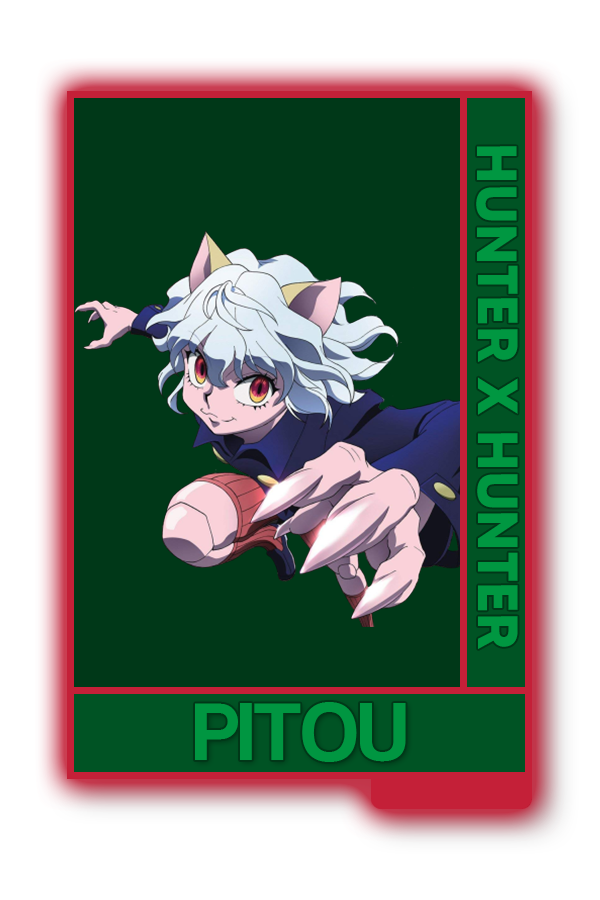
<style>
.page{position:relative;width:600px;height:900px;background:#003818}
.page>*{position:absolute;margin:0}
.t1{font:56.5px "MADETOMMY-Bold";color:#009741}
.t2{font:84.8px "CoolveticaRg-Regular";color:#009641}
</style>
<div class="page">
<p class="t1" style="left:476px;top:146px;width:42px;height:503px;rotate:90deg">HUNTER X HUNTER</p>
<p class="t2" style="left:195px;top:702px;width:211px;height:60px">PITOU</p>
</div>
